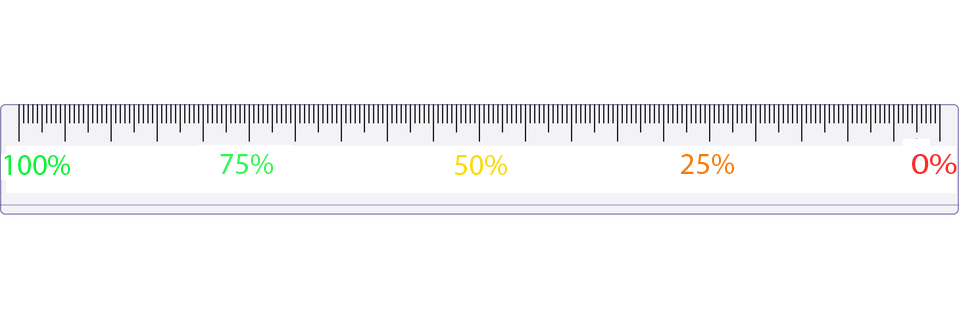
<style>
.page{position:relative;width:960px;height:320px;background:#ffffff}
.page>*{position:absolute;margin:0}
.t1{font:30px "MyriadPro-Regular";color:#09f530}
.t2{font:30px "MyriadPro-Regular";color:#2ef84f}
.t3{font:30px "MyriadPro-Regular";color:#fadb08}
.t4{font:30px "MyriadPro-Regular";color:#fa7a08}
.t5{font:29.6px "MyriadPro-Regular";color:#fc2b2b;scale:1.22 1}
</style>
<div class="page">
<p class="t1" style="left:4px;top:155px;width:66px;height:20px">100%</p>
<p class="t2" style="left:220px;top:154px;width:53px;height:20px">75%</p>
<p class="t3" style="left:454px;top:155px;width:53px;height:20px">50%</p>
<p class="t4" style="left:681px;top:154px;width:53px;height:20px">25%</p>
<p class="t5" style="left:912px;top:154px;width:45px;height:20px">0%</p>
</div>
